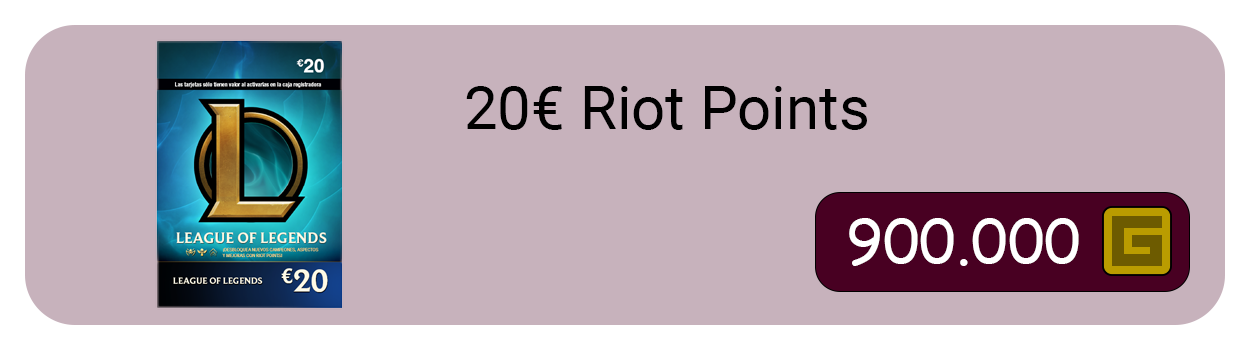
<style>
.page{position:relative;width:1250px;height:350px;background:#c7b2bc}
.page>*{position:absolute;margin:0}
.t1{font:60px "Roboto-Regular";color:#000000}
.t2{font:60px "ComicSansMS";color:#ffffff}
</style>
<div class="page">
<p class="t1" style="left:466px;top:86px;width:401px;height:44px">20€ Riot Points</p>
<p class="t2" style="left:849px;top:218px;width:230px;height:48px">900.000</p>
</div>
